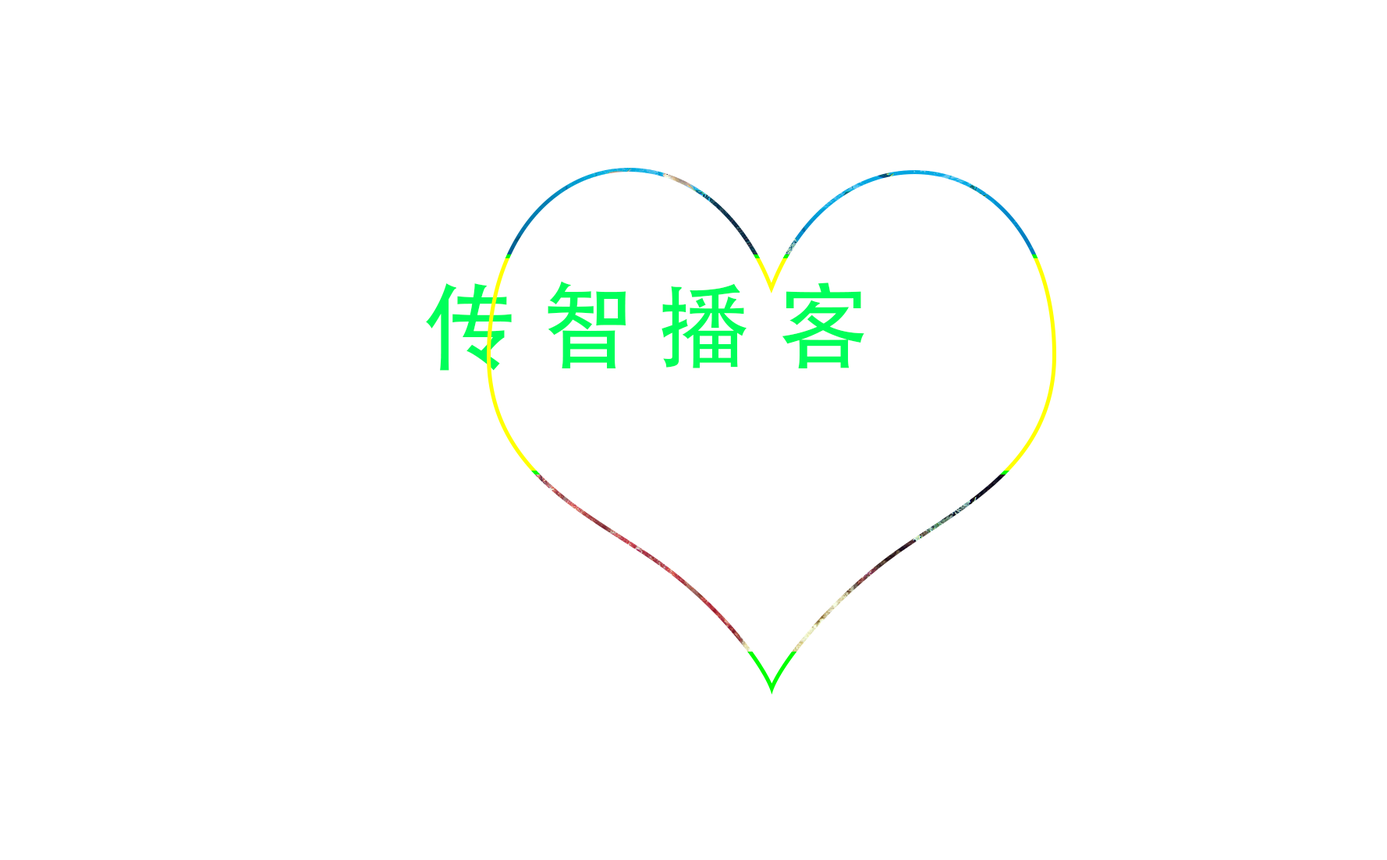
<style>
.page{position:relative;width:1387px;height:860px;background:#ffffff}
.page>*{position:absolute;margin:0}
.t1{font:93.6px "AdobeHeitiStd-Regular";letter-spacing:0.26em;color:#00ff5a;text-transform:uppercase}
</style>
<div class="page">
<p class="t1" style="left:426px;top:281px;width:438px;height:90px">传智播客</p>
</div>
